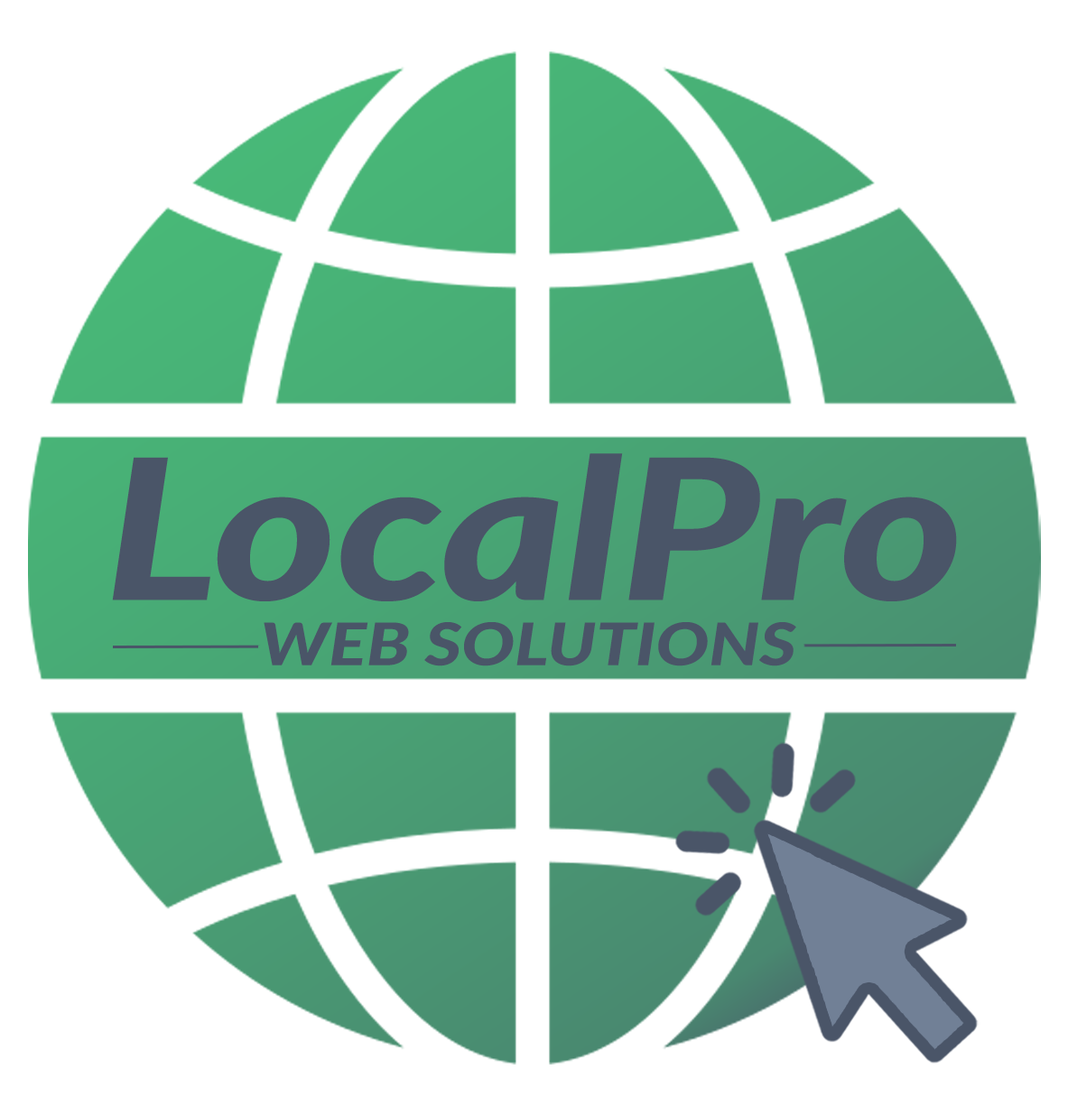
<style>
.page{position:relative;width:1068px;height:1116px;background:#ffffff}
.page>*{position:absolute;margin:0}
.t1{font:196.1px "Lato-HeavyItalic";color:#4a5568;scale:1.2 1}
.t2{font:58.6px "Lato-HeavyItalic";color:#4a5568;scale:1.2 1}
</style>
<div class="page">
<p class="t1" style="left:112px;top:453px;width:845px;height:148px">LocalPro</p>
<p class="t2" style="left:264px;top:622px;width:532px;height:44px">WEB SOLUTIONS</p>
</div>
